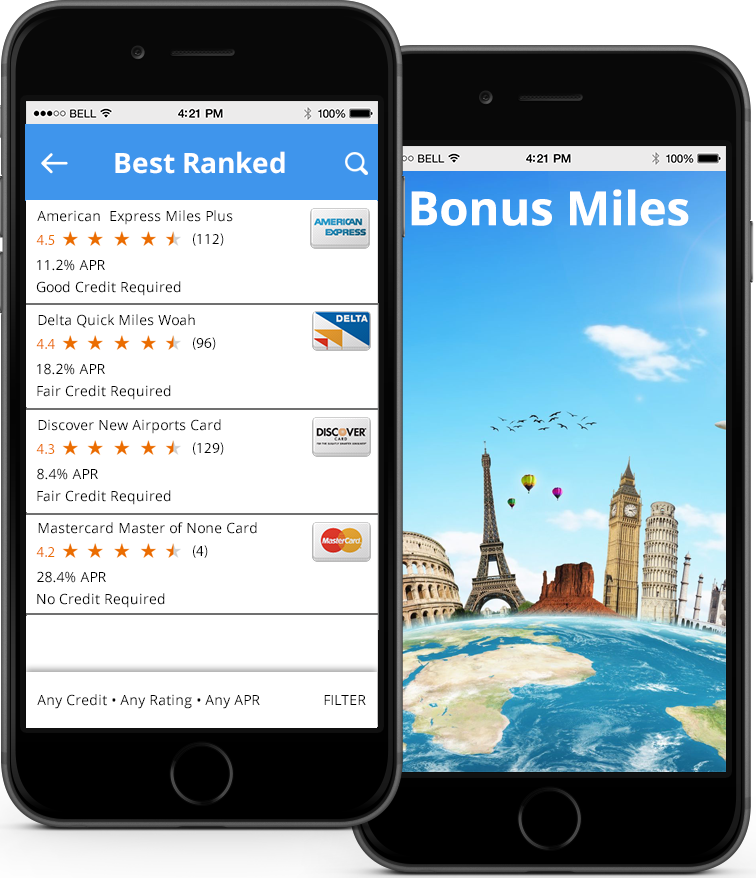
<style>
.page{position:relative;width:756px;height:878px;background:#ffffff}
.page>*{position:absolute;margin:0}
.t1{font:28px "OpenSans-Bold";color:#ffffff}
.t2{font:47px "OpenSans-Bold";color:#ffffff}
.t3{font:14px "OpenSans";color:#000000}
.t4{font:15px "MyriadPro-Regular";color:#000000}
.t5{font:15px "MyriadPro-Regular";color:#eb6e00}
</style>
<div class="page">
<p class="t1" style="left:115px;top:151px;width:170px;height:23px">Best Ranked</p>
<p class="t2" style="left:411px;top:189px;width:278px;height:37px">Bonus Miles</p>
<p class="t3" style="left:37px;top:210px;width:196px;height:15px">American  Express Miles Plus</p>
<p class="t4" style="left:193px;top:233px;width:31px;height:13px">(112)</p>
<p class="t5" style="left:36px;top:235px;width:19px;height:10px">4.5</p>
<p class="t3" style="left:37px;top:259px;width:68px;height:12px">11.2% APR</p>
<p class="t3" style="left:36px;top:281px;width:145px;height:15px">Good Credit Required</p>
<p class="t3" style="left:38px;top:314px;width:157px;height:14px">Delta Quick Miles Woah</p>
<p class="t5" style="left:36px;top:339px;width:19px;height:10px">4.4</p>
<p class="t4" style="left:193px;top:337px;width:23px;height:13px">(96)</p>
<p class="t3" style="left:37px;top:363px;width:68px;height:12px">18.2% APR</p>
<p class="t3" style="left:37px;top:385px;width:134px;height:15px">Fair Credit Required</p>
<p class="t3" style="left:38px;top:419px;width:183px;height:15px">Discover New Airports Card</p>
<p class="t5" style="left:36px;top:444px;width:19px;height:10px">4.3</p>
<p class="t4" style="left:193px;top:442px;width:31px;height:13px">(129)</p>
<p class="t3" style="left:37px;top:468px;width:61px;height:12px">8.4% APR</p>
<p class="t3" style="left:37px;top:490px;width:134px;height:15px">Fair Credit Required</p>
<p class="t3" style="left:38px;top:522px;width:219px;height:12px">Mastercard Master of None Card</p>
<p class="t4" style="left:193px;top:545px;width:15px;height:13px">(4)</p>
<p class="t5" style="left:36px;top:547px;width:19px;height:10px">4.2</p>
<p class="t3" style="left:37px;top:571px;width:69px;height:12px">28.4% APR</p>
<p class="t3" style="left:37px;top:593px;width:128px;height:15px">No Credit Required</p>
<p class="t3" style="left:37px;top:694px;width:223px;height:15px">Any Credit • Any Rating • Any APR</p>
<p class="t3" style="left:324px;top:695px;width:42px;height:10px">FILTER</p>
</div>
